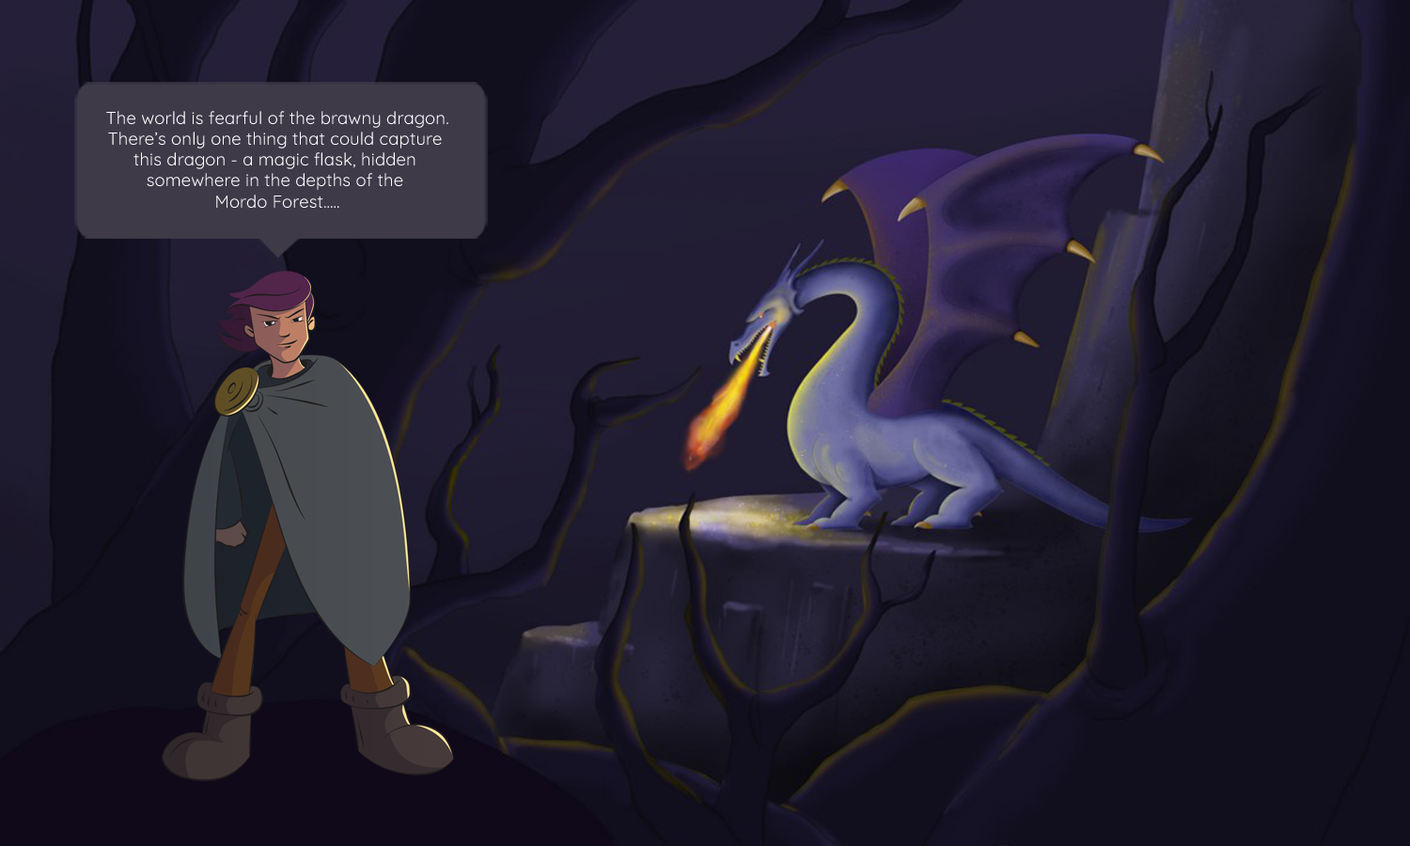
<style>
.page{position:relative;width:1410px;height:846px}
.page>*{position:absolute;margin:0}
.t1{font:17.4px "Quicksand-Regular";letter-spacing:0.01em;color:#ffffff}
</style>
<div class="page">
<p class="t1" style="left:106px;top:111px;width:342px;height:98px;text-align:center">The world is fearful of the brawny dragon.<br>There’s only one thing that could capture <br>this dragon - a magic flask, hidden <br>somewhere in the depths of the <br>Mordo Forest.....</p>
</div>
